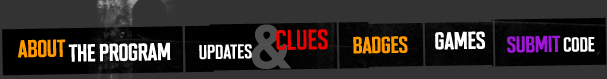
<style>
.page{position:relative;width:607px;height:79px;background:#333333}
.page>*{position:absolute;margin:0}
.t1{font:61.2px "DIN-Bold";letter-spacing:-0.04em;color:#4e4e4e;font-weight:bold}
.t2{font:28.1px "Maybe-Bold";letter-spacing:-0.04em;color:#ec0000;font-weight:bold}
.t3{font:24px "Maybe-Bold";letter-spacing:-0.04em;color:#ffffff;font-weight:bold}
.t4{font:24px "Maybe-Bold";letter-spacing:-0.04em;color:#ff9900;font-weight:bold}
.t5{font:23.3px "Maybe-Bold";letter-spacing:-0.04em;color:#ff9900;font-weight:bold}
.t6{font:22.9px "Maybe-Bold";letter-spacing:-0.04em;color:#9f18d8;font-weight:bold}
.t7{font:20.3px "Maybe-Bold";letter-spacing:-0.04em;color:#ffffff;font-weight:bold}
.t8{font:20px "Maybe-Bold";letter-spacing:-0.04em;color:#ffffff;font-weight:bold}
</style>
<div class="page">
<p class="t1" style="left:251px;top:24px;width:41px;height:45px;rotate:-1deg">&amp;</p>
<p class="t2" style="left:276px;top:29px;width:52px;height:21px;rotate:-1deg">clues</p>
<p class="t3" style="left:18px;top:39px;width:153px;height:23px;rotate:-1deg"><span class="t4">ABOUT </span>THE PROGRAM</p>
<p class="t5" style="left:353px;top:36px;width:55px;height:18px;rotate:-1deg">badges</p>
<p class="t3" style="left:435px;top:31px;width:50px;height:19px;rotate:-1deg">games</p>
<p class="t6" style="left:507px;top:35px;width:88px;height:18px;rotate:-1deg">submit <span class="t7">code</span></p>
<p class="t8" style="left:199px;top:44px;width:53px;height:16px;rotate:-1deg">updates</p>
</div>
